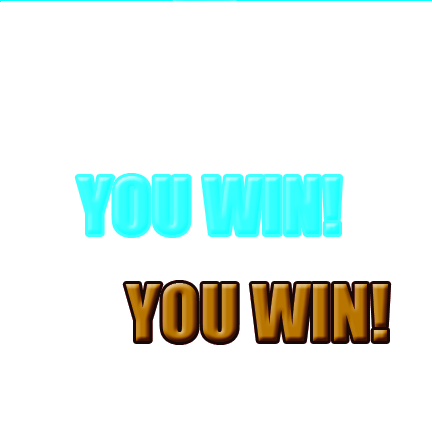
<style>
.page{position:relative;width:432px;height:433px;background:#ffffff}
.page>*{position:absolute;margin:0}
.t1{font:72px "Impact"}
</style>
<div class="page">
<p class="t1" style="left:77px;top:175px;width:264px;height:59px">YOU WIN!</p>
</div>
